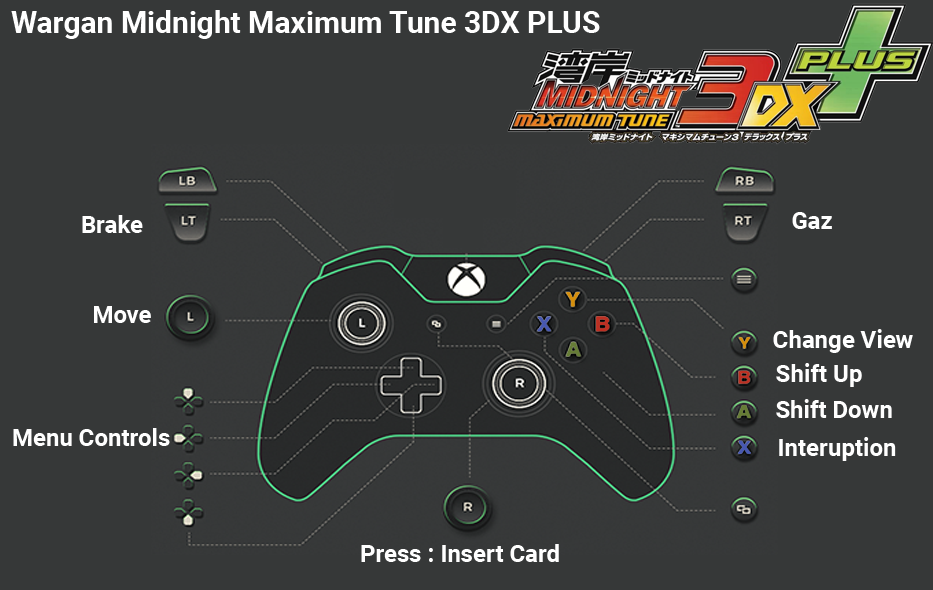
<style>
.page{position:relative;width:933px;height:590px;background:#363838}
.page>*{position:absolute;margin:0}
.t1{font:30px "Roboto-Bold";color:#ffffff}
.t2{font:24px "Roboto-Bold";color:#ffffff}
</style>
<div class="page">
<p class="t1" style="left:11px;top:10px;width:589px;height:29px">Wargan Midnight Maximum Tune 3DX PLUS</p>
<p class="t2" style="left:82px;top:215px;width:61px;height:18px">Brake</p>
<p class="t2" style="left:792px;top:212px;width:40px;height:17px">Gaz</p>
<p class="t2" style="left:94px;top:306px;width:57px;height:17px">Move</p>
<p class="t2" style="left:773px;top:329px;width:140px;height:24px">Change View</p>
<p class="t2" style="left:776px;top:363px;width:86px;height:24px">Shift Up</p>
<p class="t2" style="left:776px;top:399px;width:116px;height:19px">Shift Down</p>
<p class="t2" style="left:13px;top:428px;width:157px;height:18px">Menu Controls</p>
<p class="t2" style="left:779px;top:437px;width:117px;height:24px">Interuption</p>
<p class="t2" style="left:361px;top:544px;width:198px;height:18px">Press : Insert Card</p>
</div>
